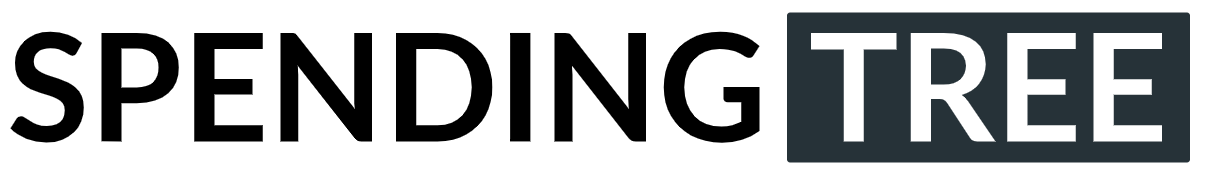
<style>
.page{position:relative;width:1207px;height:172px;background:#ffffff}
.page>*{position:absolute;margin:0}
.t1{font:150px "Lato-Bold";color:#000000}
.t2{font:150px "Lato-Bold";color:#ffffff}
</style>
<div class="page">
<p class="t1" style="left:10px;top:31px;width:750px;height:112px">SPENDING</p>
<p class="t2" style="left:810px;top:32px;width:352px;height:110px">TREE</p>
</div>
